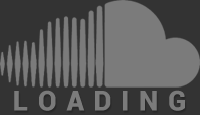
<style>
.page{position:relative;width:200px;height:115px;background:#7b7b7b}
.page>*{position:absolute;margin:0}
.t1{font:27.5px "Roboto-Black";letter-spacing:0.35em;color:#7b7b7b}
</style>
<div class="page">
<p class="t1" style="left:14px;top:90px;width:171px;height:21px">LOADING</p>
</div>
